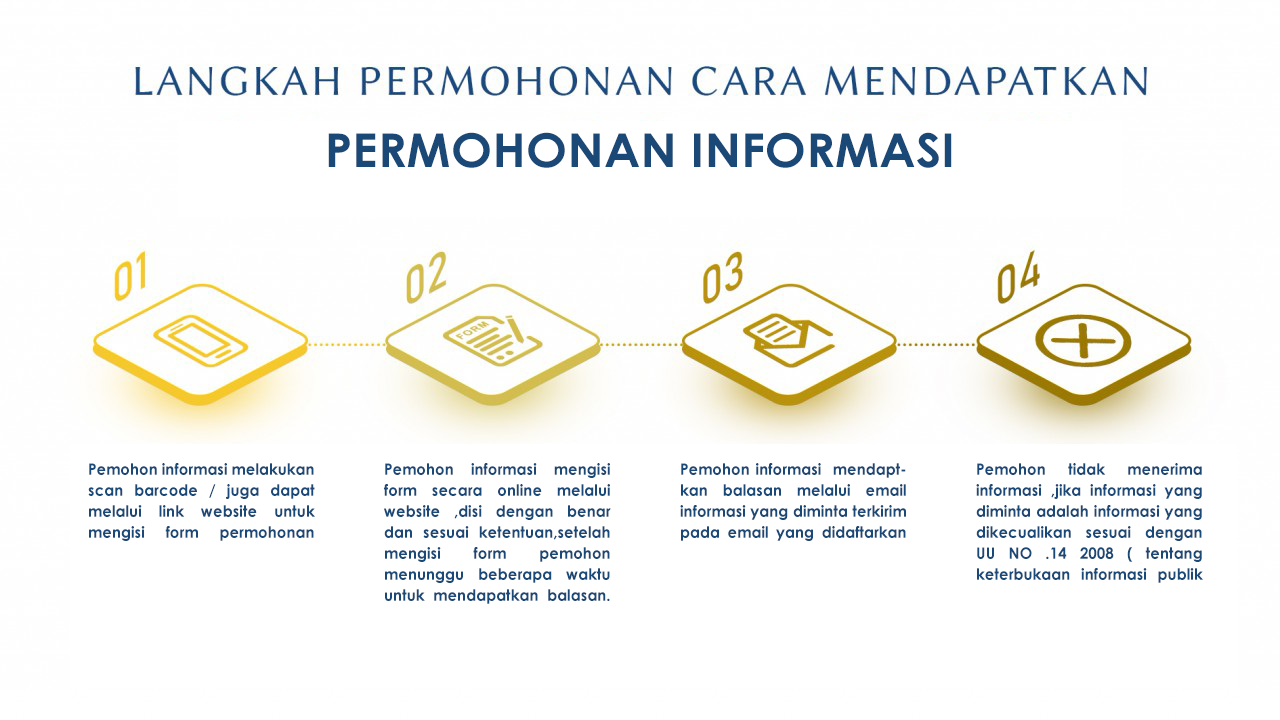
<style>
.page{position:relative;width:1280px;height:720px;background:#ffffff}
.page>*{position:absolute;margin:0}
.t1{font:46.5px "CenturyGothic-Bold";color:#1a4977;scale:1.06 1}
.t2{font:15.6px/21px "CenturyGothic-Bold";color:#1a4977;scale:0.97 1}
</style>
<div class="page">
<p class="t1" style="left:328px;top:132px;width:624px;height:36px">PERMOHONAN INFORMASI</p>
<p class="t2" style="left:88px;top:463px;width:227px;height:78px;text-align:justify">Pemohon informasi melakukan scan barcode / juga dapat melalui link website untuk mengisi form permohonan</p>
<p class="t2" style="left:384px;top:463px;width:227px;height:141px;text-align:justify">Pemohon informasi mengisi form secara online melalui website ,disi dengan benar dan sesuai ketentuan,setelah mengisi form pemohon menunggu beberapa waktu untuk mendapatkan balasan.</p>
<p class="t2" style="left:680px;top:463px;width:226px;height:78px;text-align:justify">Pemohon informasi  mendaptkan balasan melalui email  <br>informasi yang diminta terkirim pada email yang didaftarkan</p>
<p class="t2" style="left:976px;top:463px;width:227px;height:120px;text-align:justify">Pemohon tidak menerima informasi ,jika informasi yang diminta adalah informasi yang dikecualikan sesuai dengan UU NO .14 2008 ( tentang <br>keterbukaan informasi publik</p>
</div>
